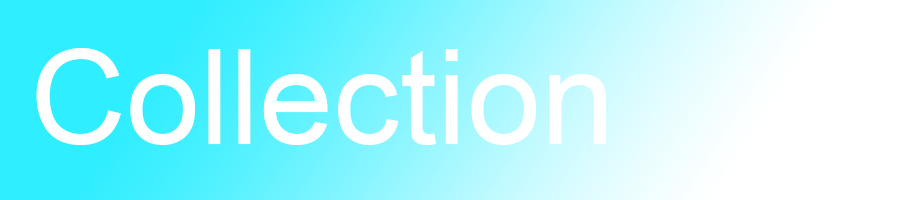
<style>
.page{position:relative;width:900px;height:200px;background:#ffffff}
.page>*{position:absolute;margin:0}
.t1{font:133.3px "ArialMT";color:#ffffff}
</style>
<div class="page">
<p class="t1" style="left:36px;top:48px;width:570px;height:97px">Collection</p>
</div>
